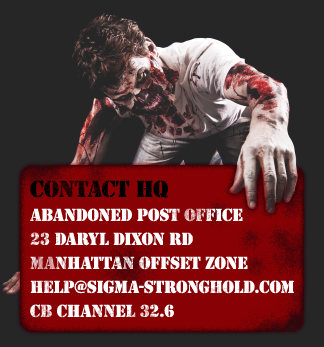
<style>
.page{position:relative;width:324px;height:347px;background:#262626}
.page>*{position:absolute;margin:0}
.t1{font:18px/16px "Stencil";color:#ffffff}
.t2{font:24px "Stencil";color:#000000}
</style>
<div class="page">
<p class="t1" style="left:30px;top:180px;width:264px;height:138px"><span class="t2">Contact HQ<br></span>Abandoned Post Office<br>23 DARyL Dixon RD<br>Manhattan Offset Zone<br>help@sigma-stronghold.com<br>CB Channel 32.6</p>
</div>
